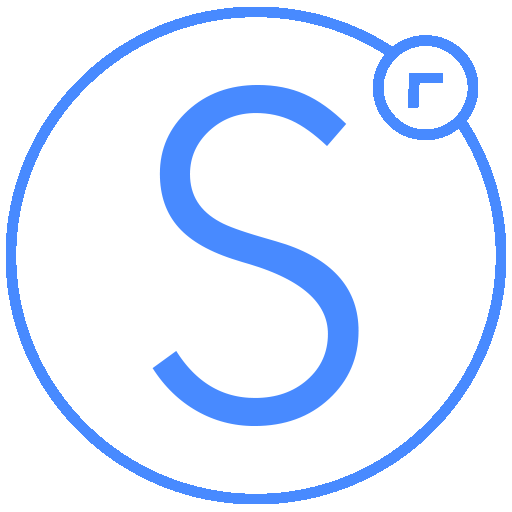
<style>
.page{position:relative;width:512px;height:512px;background:#ffffff}
.page>*{position:absolute;margin:0}
.t1{font:477.4px "KabelITCbyBT-Book";color:#488aff}
</style>
<div class="page">
<p class="t1" style="left:152px;top:85px;width:207px;height:341px">S</p>
</div>
